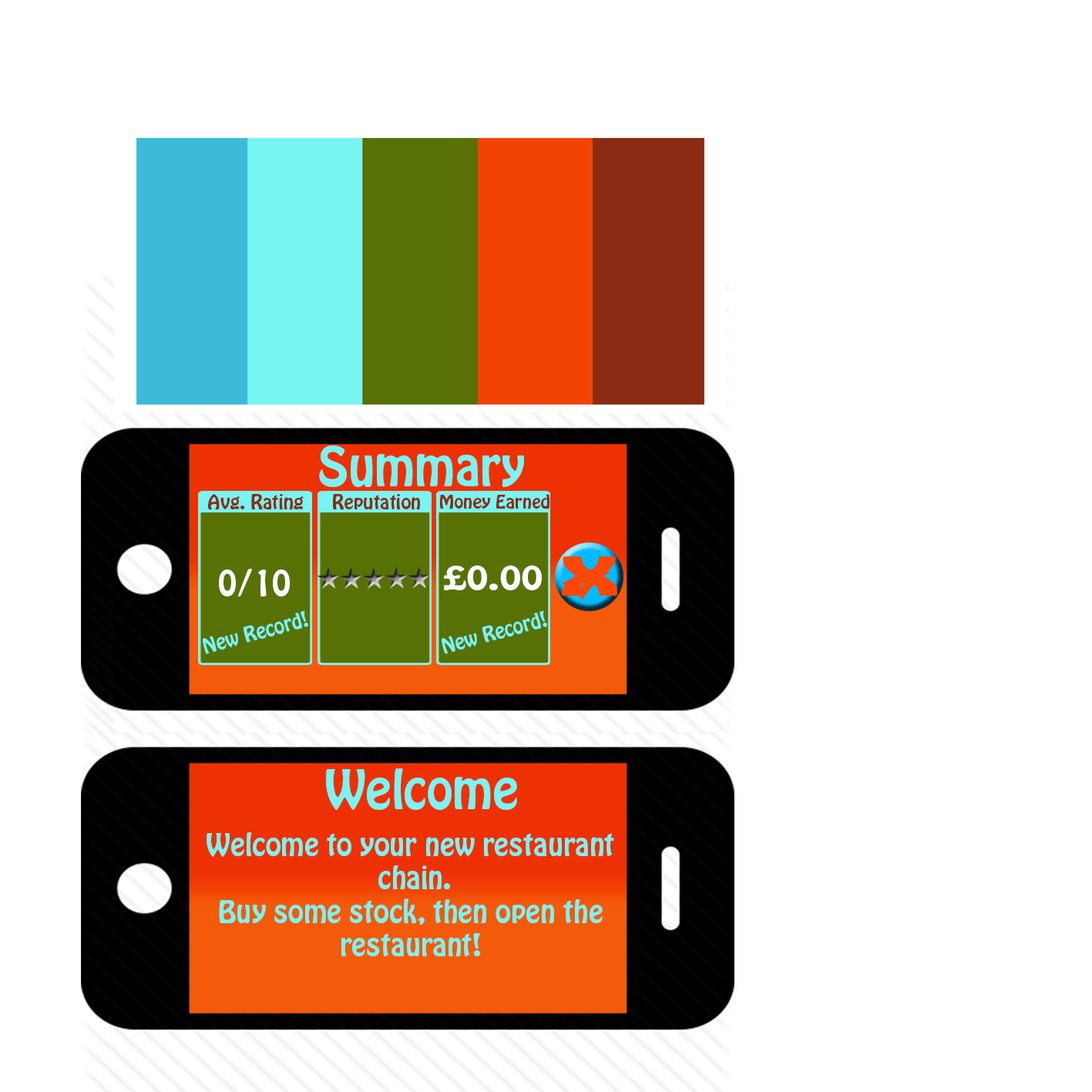
<style>
.page{position:relative;width:1092px;height:1092px;background:#ffffff}
.page>*{position:absolute;margin:0}
.t1{font:47.8px "HoboStd";color:#78f4f3}
.t2{font:17.8px "HoboStd";color:#8a2c13}
.t3{font:16.5px "HoboStd";color:#8a2c13;scale:1.04 1}
.t4{font:31.8px "HoboStd";color:#ffffff}
.t5{font:30.3px "HoboStd";color:#ffffff;scale:1.25 1}
.t6{font:18.9px "HoboStd";color:#78f4f3}
.t7{font:27.7px "HoboStd";color:#78f4f3}
</style>
<div class="page">
<p class="t1" style="left:319px;top:445px;width:205px;height:42px">Summary</p>
<p class="t2" style="left:208px;top:494px;width:96px;height:15px">Avg. Rating</p>
<p class="t2" style="left:333px;top:494px;width:87px;height:15px">Reputation</p>
<p class="t3" style="left:440px;top:494px;width:109px;height:15px">Money Earned</p>
<p class="t4" style="left:219px;top:569px;width:71px;height:27px">0/10</p>
<p class="t5" style="left:443px;top:565px;width:99px;height:25px">£0.00</p>
<p class="t6" style="left:203px;top:610px;width:105px;height:44px;rotate:-15deg">New Record!</p>
<p class="t6" style="left:442px;top:610px;width:105px;height:44px;rotate:-15deg">New Record!</p>
<p class="t1" style="left:326px;top:768px;width:191px;height:42px">Welcome</p>
<p class="t7" style="left:207px;top:832px;width:407px;height:124px;text-align:center">Welcome to your new restaurant<br> chain.<br>Buy some stock, then open the<br>restaurant!</p>
</div>
